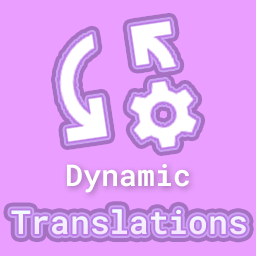
<style>
.page{position:relative;width:256px;height:256px;background:#ea9eff}
.page>*{position:absolute;margin:0}
.t1{font:30px "RobotoMono-SemiBold";color:#ffffff}
.t2{font:32.9px "RobotoMono-SemiBold";color:#ffffff}
</style>
<div class="page">
<p class="t1" style="left:67px;top:164px;width:122px;height:29px">Dynamic</p>
<p class="t2" style="left:11px;top:209px;width:235px;height:26px">Translations</p>
</div>
